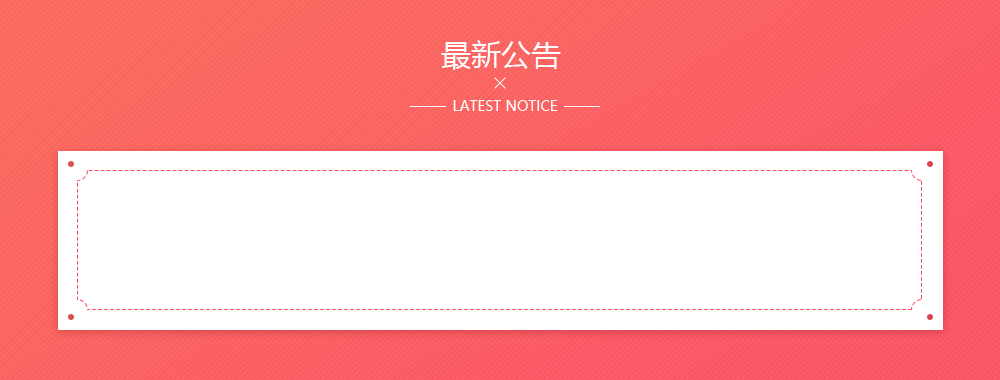
<style>
.page{position:relative;width:1000px;height:380px;background:#ffffff}
.page>*{position:absolute;margin:0}
.t1{font:30px "MicrosoftYaHei";color:#ffffff}
.t2{font:14px "MicrosoftYaHei";color:#ffffff}
</style>
<div class="page">
<p class="t1" style="left:441px;top:40px;width:120px;height:30px">最新公告</p>
<p class="t2" style="left:453px;top:100px;width:104px;height:11px">LATEST NOTICE</p>
</div>
